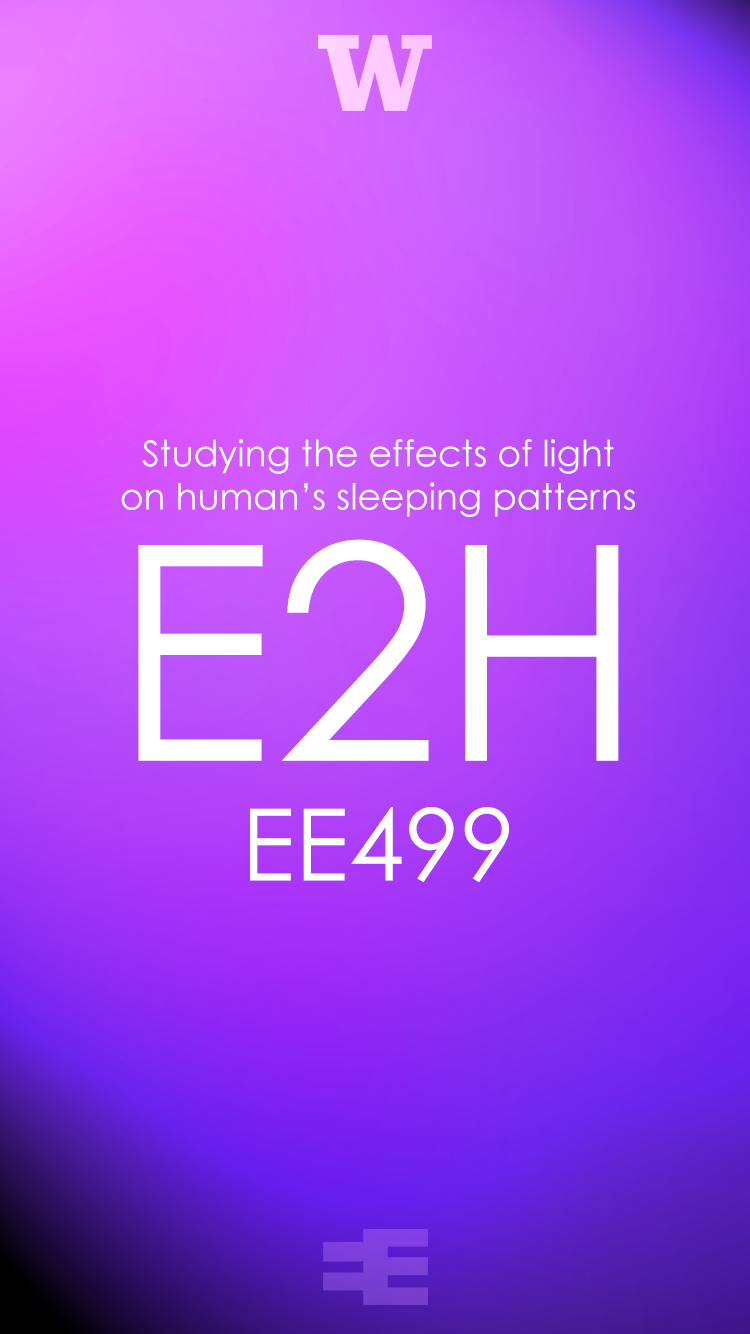
<style>
.page{position:relative;width:750px;height:1334px}
.page>*{position:absolute;margin:0}
.t1{font:36px "CenturyGothic";color:#ffffff}
.t2{font:100px "CenturyGothic";color:#ffffff}
.t3{font:300px "CenturyGothic";color:#ffffff}
</style>
<div class="page">
<p class="t1" style="left:121px;top:439px;width:514px;height:78px;text-align:center">Studying the effects of light <br>on human’s sleeping patterns</p>
<p class="t2" style="left:138px;top:539px;width:481px;height:344px;text-align:center"><span class="t3">E2H<br></span>EE499</p>
</div>
